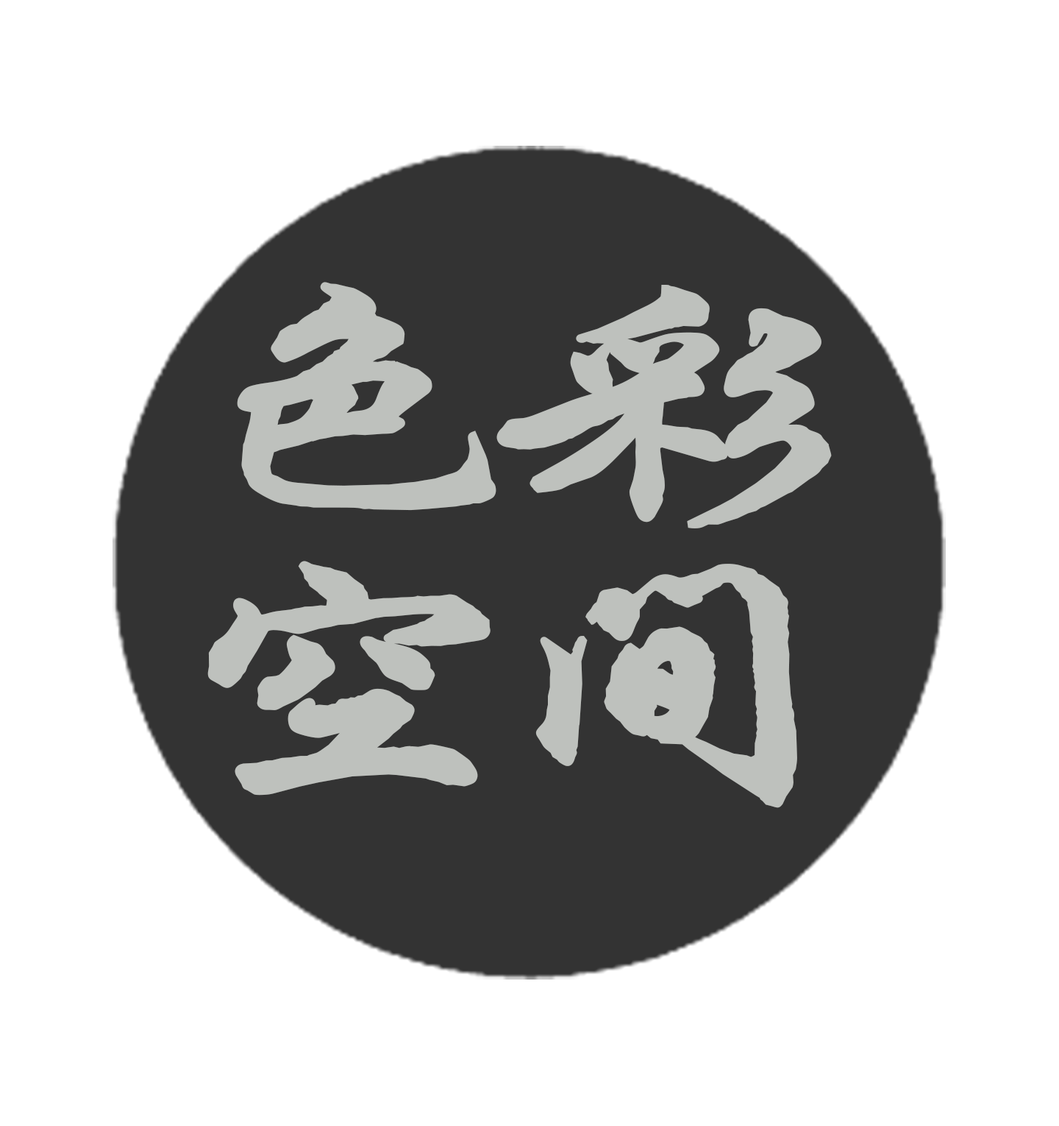
<style>
.page{position:relative;width:1059px;height:1126px;background:#ffffff}
.page>*{position:absolute;margin:0}
.t1{font:288.1px/281.1px "HYi1gj";letter-spacing:-0.24em;color:#bec1bd;font-weight:bold;scale:1.45 1}
</style>
<div class="page">
<p class="t1" style="left:207px;top:282px;width:625px;height:526px">色彩<br>空间</p>
</div>
